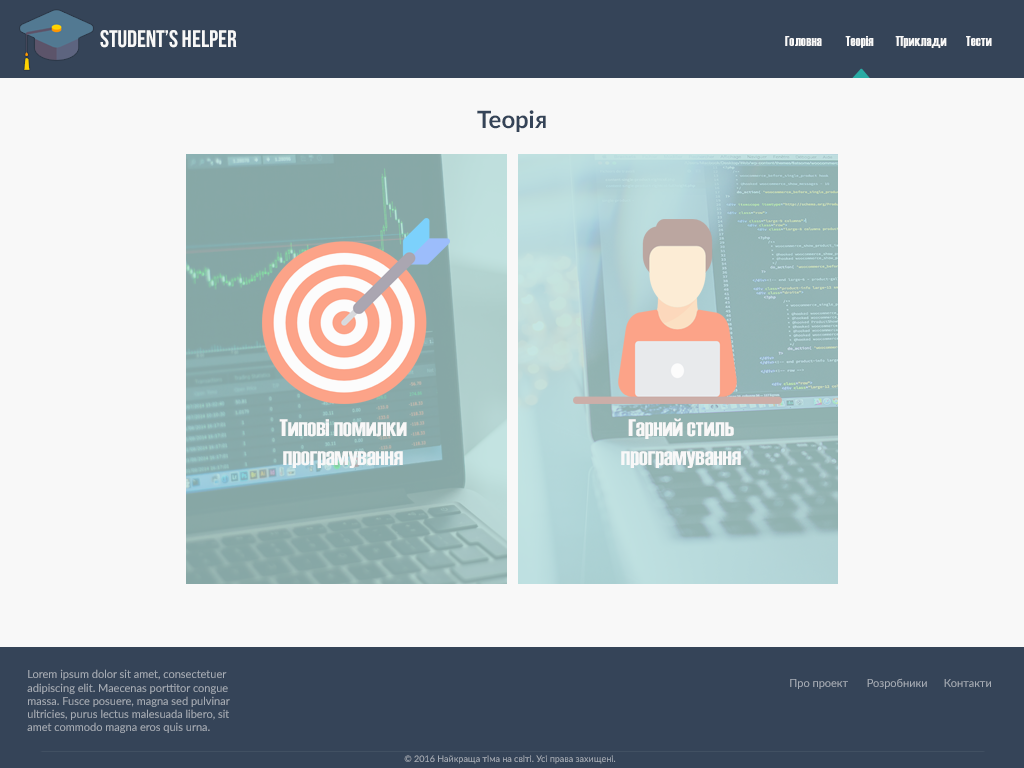
<style>
.page{position:relative;width:1024px;height:768px;background:#f8f8f8}
.page>*{position:absolute;margin:0}
.t1{font:24px "BebasNeue";color:#f8f8f8}
.t2{font:14px "Haettenschweiler";color:#f8f8f8}
.t3{font:24px "Lato-Bold";color:#354458}
.t4{font:24px "Haettenschweiler";color:#f8f8f8}
.t5{font:11px "Lato-Regular";color:#a6acb5}
.t6{font:9px "Lato-Regular";color:#a6acb5}
</style>
<div class="page">
<p class="t1" style="left:100px;top:30px;width:137px;height:18px">student’s helper</p>
<p class="t2" style="left:785px;top:36px;width:37px;height:10px">Головна</p>
<p class="t2" style="left:845px;top:36px;width:29px;height:12px">Теорія</p>
<p class="t2" style="left:895px;top:36px;width:52px;height:12px">Приклади</p>
<p class="t2" style="left:966px;top:36px;width:26px;height:10px">Тести</p>
<p class="t3" style="left:477px;top:110px;width:69px;height:22px">Теорія</p>
<p class="t4" style="left:279px;top:419px;width:128px;height:49px;text-align:center">Типові помилки програмування</p>
<p class="t4" style="left:621px;top:418px;width:120px;height:50px;text-align:center">Гарний стиль програмування</p>
<p class="t5" style="left:27px;top:669px;width:203px;height:64px">Lorem ipsum dolor sit amet, consectetuer adipiscing elit. Maecenas porttitor congue massa. Fusce posuere, magna sed pulvinar ultricies, purus lectus malesuada libero, sit amet commodo magna eros quis urna. Nunc viverra imperdiet enim. Fusce est.</p>
<p class="t5" style="left:867px;top:678px;width:60px;height:11px">Розробники</p>
<p class="t5" style="left:790px;top:679px;width:58px;height:10px">Про проект</p>
<p class="t5" style="left:944px;top:679px;width:47px;height:8px">Контакти</p>
<p class="t6" style="left:404px;top:755px;width:212px;height:9px">© 2016 Найкраща тіма на світі. Усі права захищені.</p>
</div>
